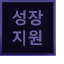
<style>
.page{position:relative;width:64px;height:64px;background:#ffffff}
.page>*{position:absolute;margin:0}
.t1{font:16px "MalgunGothicBold";color:#6861a3}
</style>
<div class="page">
<p class="t1" style="left:12px;top:10px;width:31px;height:36px">성장<br>지원</p>
</div>
